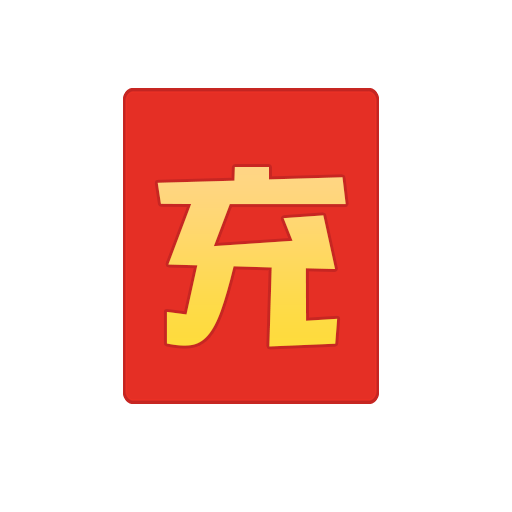
<style>
.page{position:relative;width:512px;height:512px;background:#ffffff}
.page>*{position:absolute;margin:0}
.t1{font:197px "MFTongXin_Noncommercial-Regular";scale:1.08 1}
</style>
<div class="page">
<p class="t1" style="left:157px;top:167px;width:189px;height:180px">充</p>
</div>
